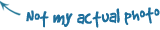
<style>
.page{position:relative;width:160px;height:30px;background:#ffffff}
.page>*{position:absolute;margin:0}
.t1{font:21px "GoodDog";color:#1e6f9c}
</style>
<div class="page">
<p class="t1" style="left:26px;top:7px;width:134px;height:21px;rotate:-5deg">Not my actual photo</p>
</div>
